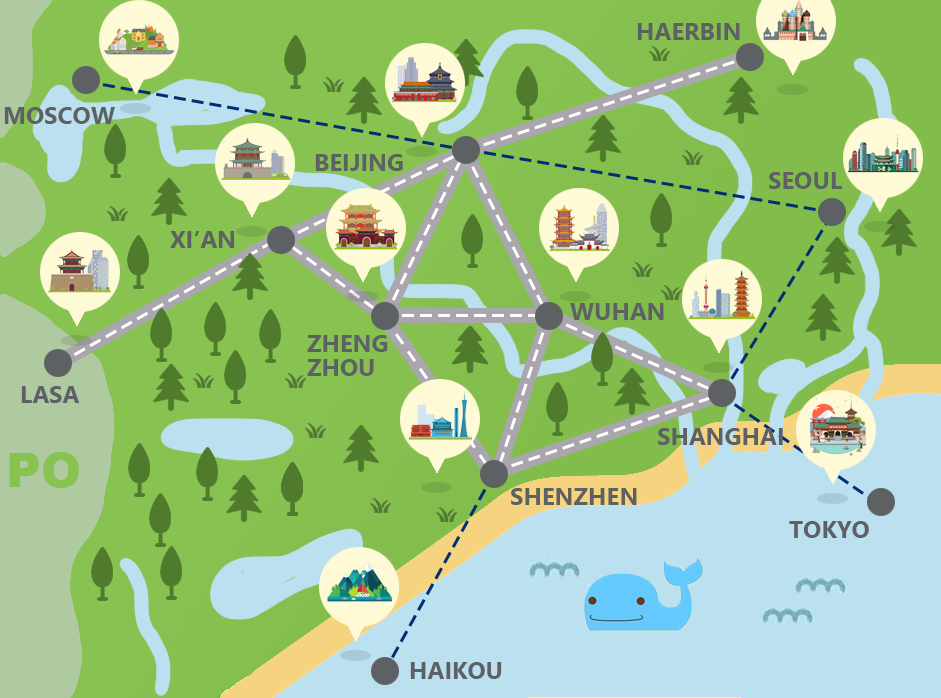
<style>
.page{position:relative;width:941px;height:698px;background:#bbe0f0}
.page>*{position:absolute;margin:0}
.t1{font:24px "LeelawadeeUI-Bold";color:#5d6164}
.t2{font:24px/24px "LeelawadeeUI-Bold";color:#5d6164}
.t3{font:48px "Arial-Black";color:#88c251}
</style>
<div class="page">
<p class="t1" style="left:637px;top:23px;width:103px;height:17px">HAERBIN</p>
<p class="t1" style="left:4px;top:107px;width:111px;height:17px">MOSCOW</p>
<p class="t1" style="left:315px;top:154px;width:88px;height:17px">BEIJING</p>
<p class="t1" style="left:769px;top:172px;width:73px;height:17px">SEOUL</p>
<p class="t1" style="left:170px;top:231px;width:64px;height:17px">XI’AN</p>
<p class="t1" style="left:570px;top:303px;width:94px;height:17px">WUHAN</p>
<p class="t2" style="left:307px;top:335px;width:81px;height:41px">ZHENGZHOU</p>
<p class="t1" style="left:21px;top:386px;width:59px;height:17px">LASA</p>
<p class="t1" style="left:658px;top:428px;width:125px;height:17px">SHANGHAI</p>
<p class="t3" style="left:9px;top:452px;width:70px;height:36px">PO</p>
<p class="t1" style="left:511px;top:488px;width:126px;height:17px">SHENZHEN</p>
<p class="t1" style="left:789px;top:521px;width:80px;height:17px">TOKYO</p>
<p class="t1" style="left:410px;top:662px;width:92px;height:17px">HAIKOU</p>
</div>
